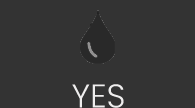
<style>
.page{position:relative;width:195px;height:108px;background:#333333}
.page>*{position:absolute;margin:0}
.t1{font:33px "Poppins-Light";color:#efeeee}
</style>
<div class="page">
<p class="t1" style="left:72px;top:84px;width:52px;height:24px">YES</p>
</div>
